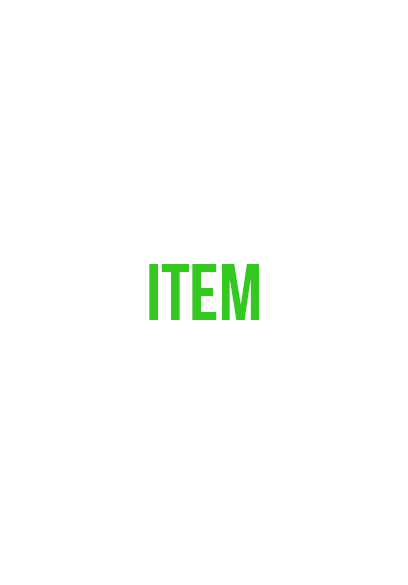
<style>
.page{position:relative;width:408px;height:585px;background:#ffffff}
.page>*{position:absolute;margin:0}
.t1{font:80px "BebasNeue";color:#33c920}
</style>
<div class="page">
<p class="t1" style="left:149px;top:264px;width:110px;height:56px">item</p>
</div>
